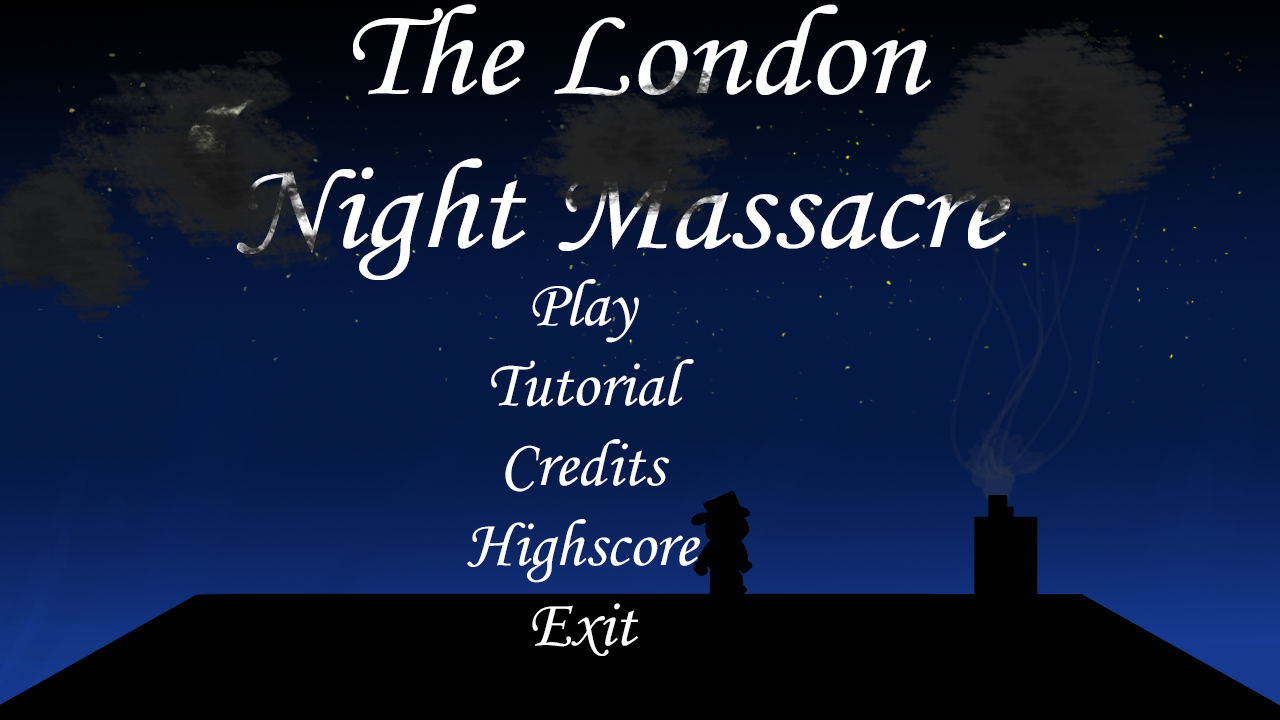
<style>
.page{position:relative;width:1280px;height:720px}
.page>*{position:absolute;margin:0}
.t1{font:128.3px "MonotypeCorsiva";color:#ffffff;scale:1.07 1}
.t2{font:66.7px "MonotypeCorsiva";color:#ffffff}
</style>
<div class="page">
<p class="t1" style="left:237px;top:4px;width:774px;height:276px;text-align:center">The London<br>Night Massacre</p>
<p class="t2" style="left:467px;top:279px;width:233px;height:377px;text-align:center">Play<br>Tutorial<br>Credits<br>Highscore<br>Exit</p>
</div>
